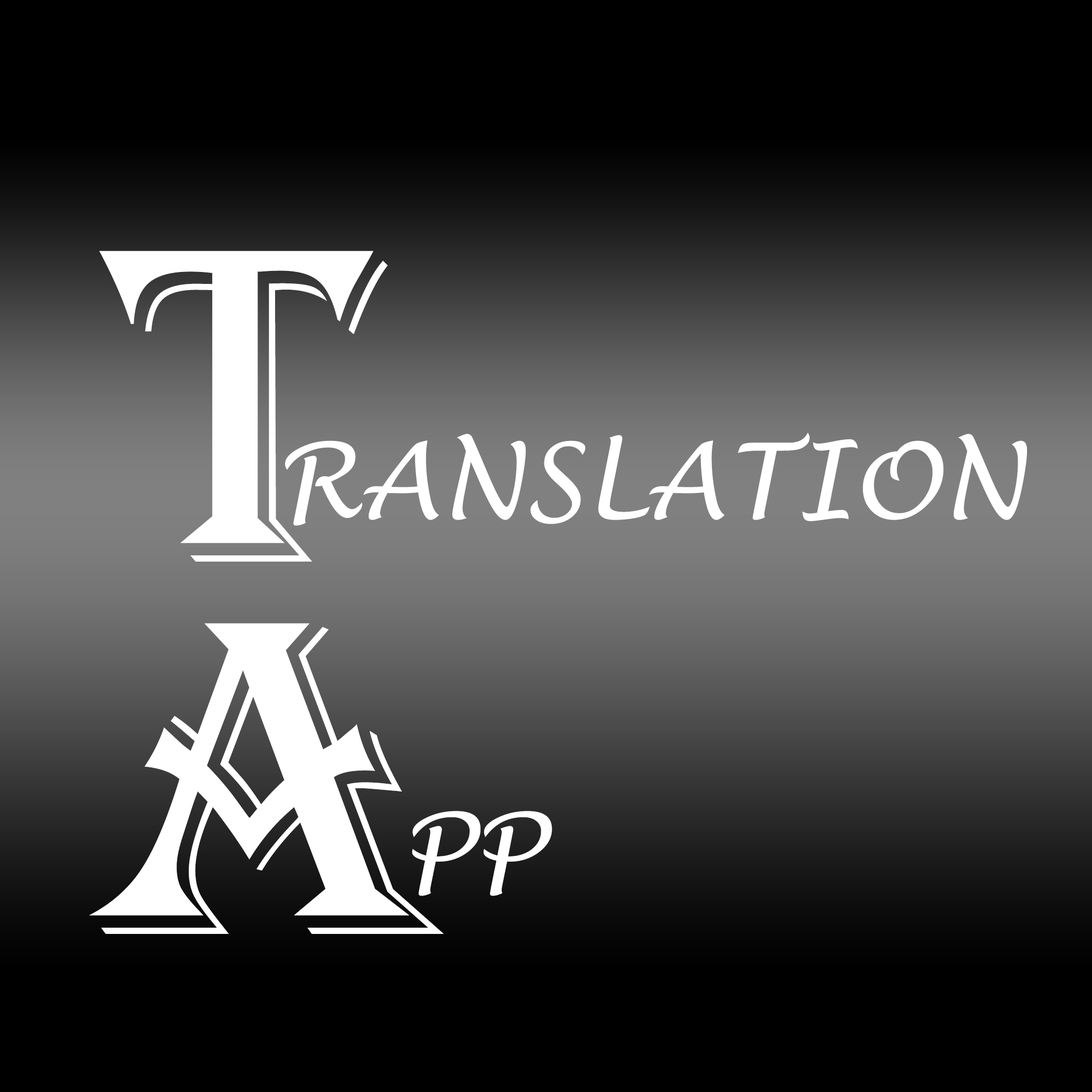
<style>
.page{position:relative;width:1092px;height:1092px;background:#000000}
.page>*{position:absolute;margin:0}
.t1{font:465.9px "Algerian";color:#ffffff}
.t2{font:104px "LucidaHandwriting-Italic";color:#ffffff}
</style>
<div class="page">
<p class="t1" style="left:99px;top:251px;width:289px;height:311px">T</p>
<p class="t2" style="left:285px;top:433px;width:742px;height:93px">RANSLATION</p>
<p class="t1" style="left:89px;top:623px;width:355px;height:311px">A</p>
<p class="t2" style="left:412px;top:811px;width:140px;height:85px">PP</p>
</div>
